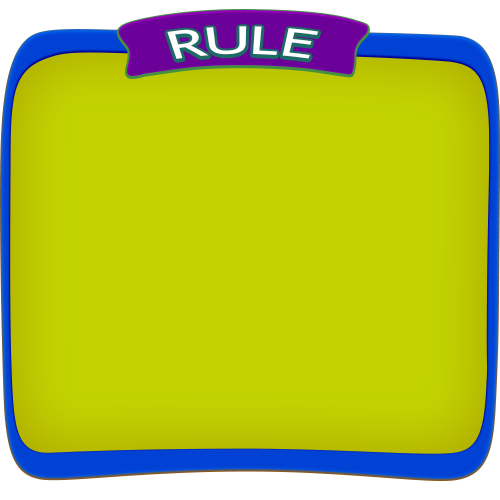
<style>
.page{position:relative;width:500px;height:500px;background:#c2d301}
.page>*{position:absolute;margin:0}
.t1{font:36.9px "Tahoma";letter-spacing:-0.02em;color:#ffffff;scale:1.54 1}
</style>
<div class="page">
<p class="t1" style="left:167px;top:26px;width:152px;height:33px">RULE</p>
</div>
